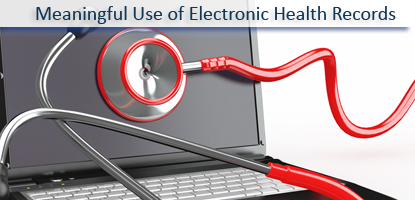
<style>
.page{position:relative;width:415px;height:200px}
.page>*{position:absolute;margin:0}
.t1{font:20px "Calibri";color:#0f3654}
</style>
<div class="page">
<p class="t1" style="left:36px;top:6px;width:360px;height:18px">Meaningful Use of Electronic Health Records</p>
</div>
